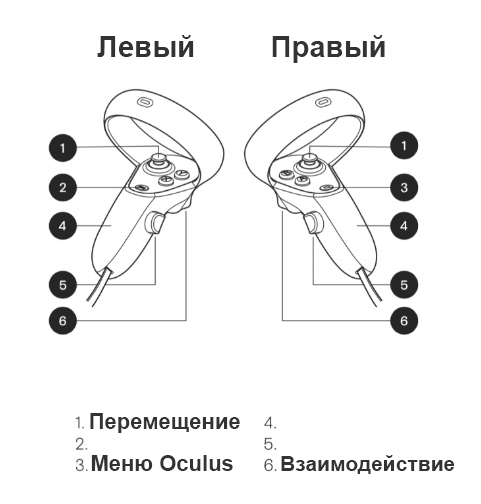
<style>
.page{position:relative;width:481px;height:504px;background:#ffffff}
.page>*{position:absolute;margin:0}
.t1{font:29.4px "Arial-BoldMT";color:#333333}
.t2{font:22px "Arial-BoldMT";color:#333333}
.t3{font:21px "Arial-BoldMT";color:#333333}
</style>
<div class="page">
<p class="t1" style="left:97px;top:35px;width:97px;height:22px">Левый</p>
<p class="t1" style="left:272px;top:35px;width:113px;height:28px">Правый</p>
<p class="t2" style="left:90px;top:413px;width:150px;height:20px">Перемещение</p>
<p class="t2" style="left:91px;top:455px;width:142px;height:16px">Меню Oculus</p>
<p class="t3" style="left:281px;top:455px;width:174px;height:19px">Взаимодействие</p>
</div>
